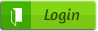
<style>
.page{position:relative;width:98px;height:31px;background:#7bc716}
.page>*{position:absolute;margin:0}
.t1{font:16px "Amaranth-Italic";color:#305102}
</style>
<div class="page">
<p class="t1" style="left:44px;top:8px;width:36px;height:16px">Login</p>
</div>
